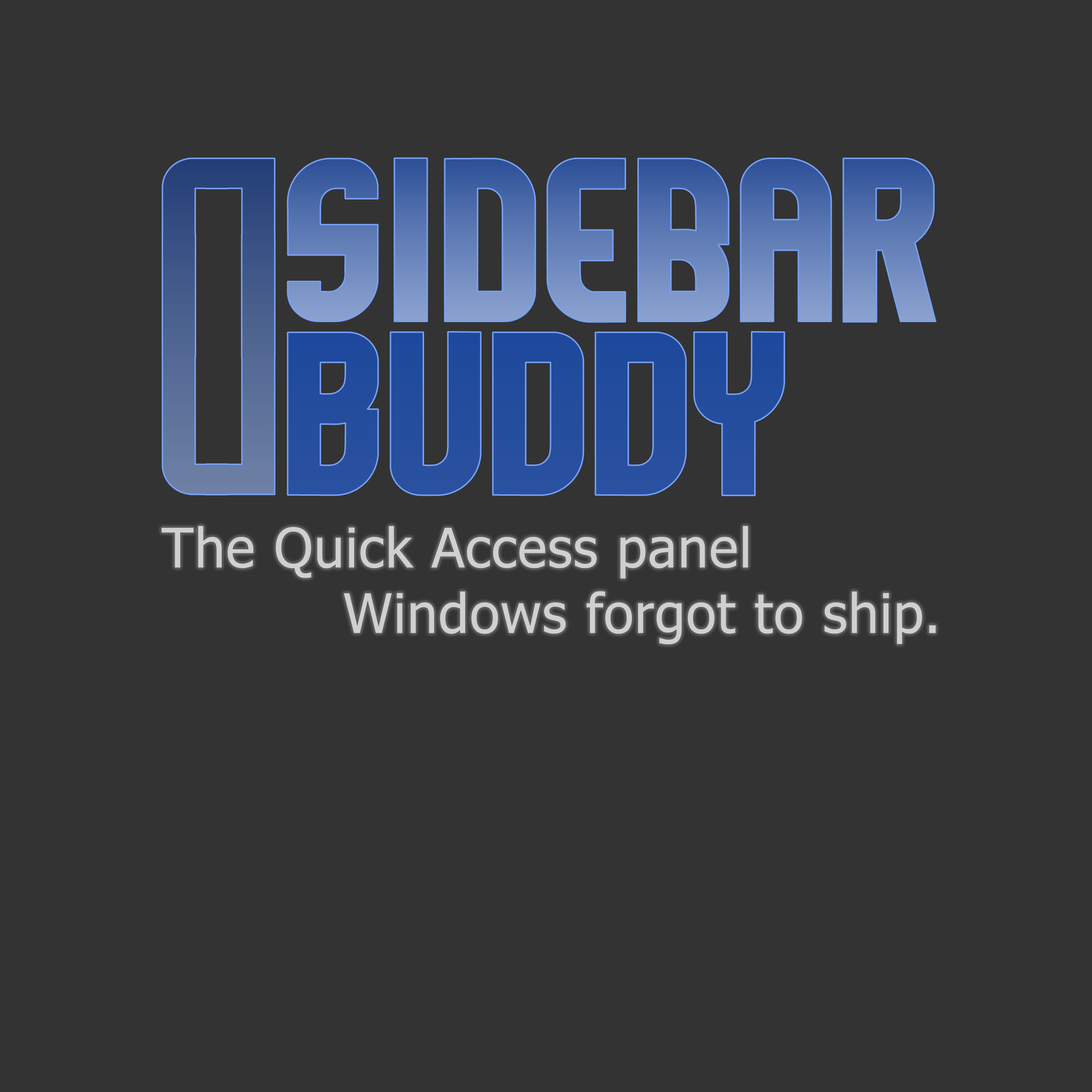
<style>
.page{position:relative;width:1092px;height:1092px;background:#333333}
.page>*{position:absolute;margin:0}
.t1{font:211.1px "Komikazoom";letter-spacing:0.02em}
.t2{font:211.1px "Komikazoom";letter-spacing:0.02em;color:#173f92}
.t3{font:54.6px "Tahoma";letter-spacing:0.02em;color:#d0d0d0}
</style>
<div class="page">
<p class="t1" style="left:288px;top:158px;width:648px;height:164px">SIDEBAR</p>
<p class="t2" style="left:288px;top:332px;width:496px;height:163px">buddy</p>
<p class="t3" style="left:162px;top:526px;width:774px;height:118px">The Quick Access panel<br>          Windows forgot to ship.</p>
</div>
